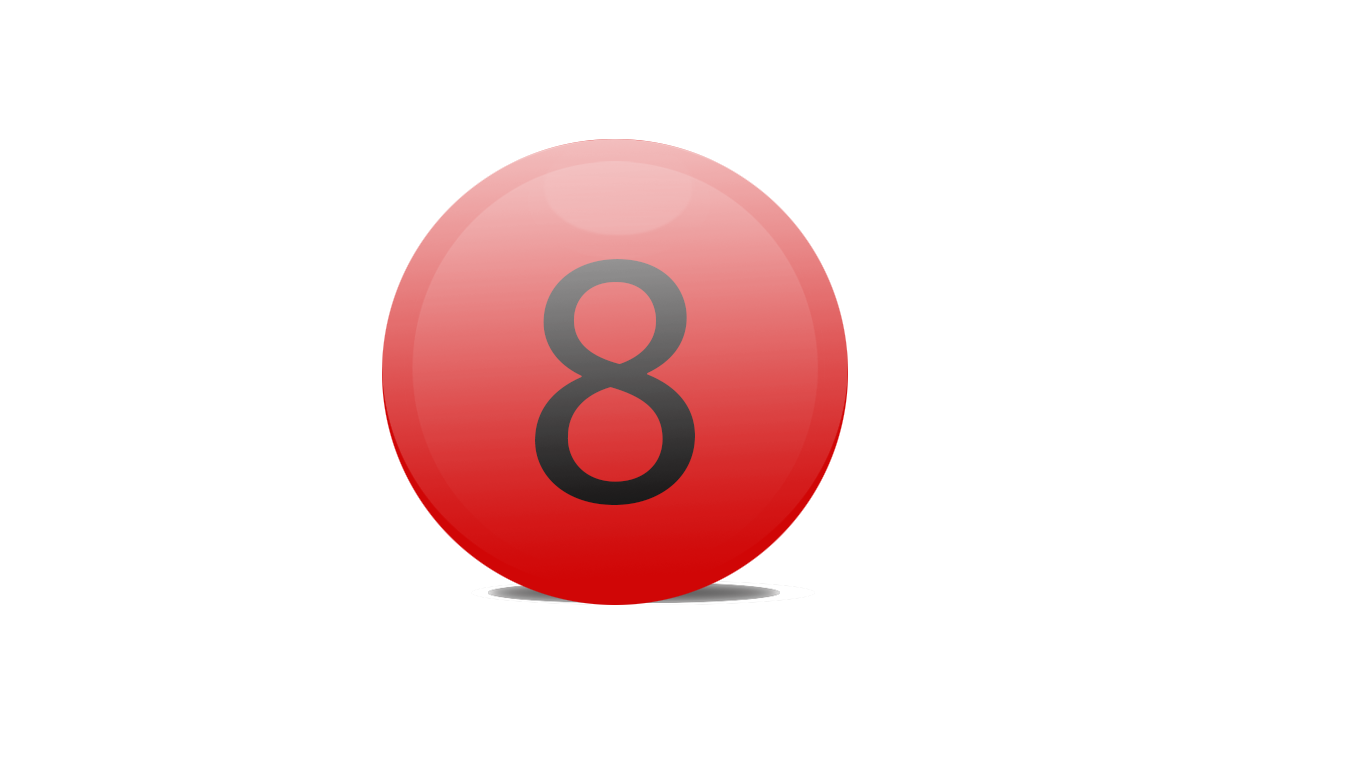
<style>
.page{position:relative;width:1366px;height:768px;background:#ffffff}
.page>*{position:absolute;margin:0}
.t1{font:366px "MyriadPro-Regular"}
</style>
<div class="page">
<p class="t1" style="left:535px;top:259px;width:160px;height:246px">8</p>
</div>
